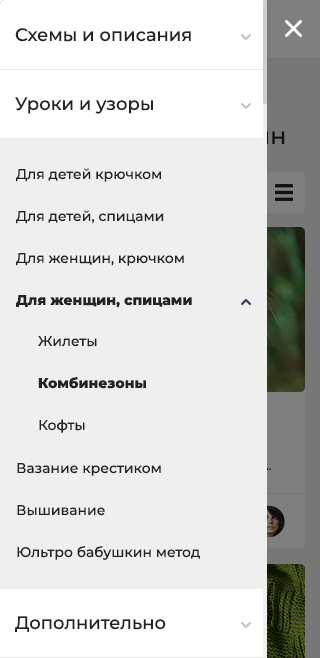
<style>
.page{position:relative;width:320px;height:658px;background:#efefef}
.page>*{position:absolute;margin:0}
.t1{font:18px "Montserrat-Medium";color:#222328}
.t2{font:14px/42px "Montserrat-Medium";color:#222328}
.t3{font:14px/42px "Montserrat-ExtraBold";color:#222328}
</style>
<div class="page">
<p class="t1" style="left:15px;top:28px;width:176px;height:14px">Схемы и описания</p>
<p class="t1" style="left:15px;top:97px;width:138px;height:17px">Уроки и узоры</p>
<p class="t2" style="left:16px;top:168px;width:184px;height:392px">Для детей крючком<br>Для детей, спицами<br>Для женщин, крючком<br><span class="t3">Для женщин, спицами<br></span><br><br><br>Вазание крестиком<br>Вышивание<br>Юльтро бабушкин метод</p>
<p class="t3" style="left:38px;top:336px;width:108px;height:97px"><span class="t2">Жилеты<br></span>Комбинезоны<br><span class="t2">Кофты</span></p>
<p class="t1" style="left:15px;top:616px;width:151px;height:16px">Дополнительно</p>
</div>
